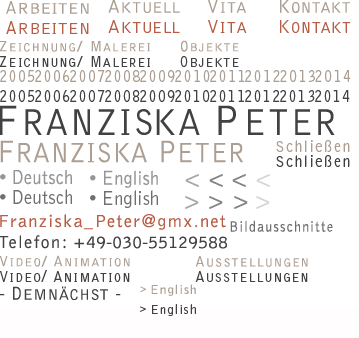
<style>
.page{position:relative;width:359px;height:338px;background:#ffffff}
.page>*{position:absolute;margin:0}
.t1{font:22px "BellGothicStd-Light";color:#ac9e92;font-variant:small-caps;scale:1.07 1}
.t2{font:18.5px "BellGothicStd-Light";letter-spacing:0.06em;color:#ac9e92;font-variant:small-caps;scale:0.87 1}
.t3{font:22.7px "BellGothicStd-Light";letter-spacing:0.06em;color:#ac9e92;font-variant:small-caps;scale:1.04 1}
.t4{font:22px "BellGothicStd-Light";color:#ac9e92;font-variant:small-caps}
.t5{font:19.1px "BellGothicStd-Light";letter-spacing:0.06em;color:#ac9e92;font-variant:small-caps;scale:0.92 1}
.t6{font:22px "BellGothicStd-Light";letter-spacing:0.06em;color:#ac9e92;font-variant:small-caps}
.t7{font:22px "BellGothicStd-Light";letter-spacing:0.025em;color:#ac9e92;font-variant:small-caps}
.t8{font:19.1px "BellGothicStd-Light";letter-spacing:0.07em;color:#ac9e92;font-variant:small-caps;scale:0.92 1}
.t9{font:22px "BellGothicStd-Light";letter-spacing:0.03em;color:#ac9e92;font-variant:small-caps}
.t10{font:19.1px "BellGothicStd-Light";letter-spacing:0.08em;color:#ac9e92;font-variant:small-caps;scale:0.92 1}
.t11{font:22px "BellGothicStd-Light";color:#b75d46;font-variant:small-caps;scale:1.07 1}
.t12{font:18.9px "BellGothicStd-Light";letter-spacing:0.06em;color:#b75d46;font-variant:small-caps;scale:0.85 1}
.t13{font:23.3px "BellGothicStd-Light";letter-spacing:0.06em;color:#b75d46;font-variant:small-caps}
.t14{font:22.9px "BellGothicStd-Light";color:#b75d46;font-variant:small-caps}
.t15{font:22px "BellGothicStd-Light";color:#b75d46;font-variant:small-caps}
.t16{font:19.1px "BellGothicStd-Light";letter-spacing:0.06em;color:#b75d46;font-variant:small-caps;scale:0.92 1}
.t17{font:22px "BellGothicStd-Light";letter-spacing:0.06em;color:#b75d46;font-variant:small-caps}
.t18{font:22px "BellGothicStd-Light";letter-spacing:0.025em;color:#b75d46;font-variant:small-caps}
.t19{font:19.1px "BellGothicStd-Light";letter-spacing:0.07em;color:#b75d46;font-variant:small-caps;scale:0.92 1}
.t20{font:22px "BellGothicStd-Light";letter-spacing:0.02em;color:#b75d46;font-variant:small-caps}
.t21{font:22.9px "BellGothicStd-Light";letter-spacing:0.025em;color:#b75d46;font-variant:small-caps;scale:0.96 1}
.t22{font:19.1px "BellGothicStd-Light";letter-spacing:0.08em;color:#b75d46;font-variant:small-caps;scale:0.92 1}
.t23{font:22px "BellGothicStd-Light";letter-spacing:0.03em;color:#b75d46;font-variant:small-caps}
.t24{font:22px "BellGothicStd-Light";letter-spacing:-0.03em;color:#b75d46;font-variant:small-caps}
.t25{font:22.9px "BellGothicStd-Light";color:#b75d46;font-variant:small-caps;scale:0.96 1}
.t26{font:22px "BellGothicStd-Light";letter-spacing:0.03em;color:#b75d46;font-variant:small-caps;scale:0.97 1}
.t27{font:17px "BellGothicStd-Light";letter-spacing:0.08em;color:#ac9e92;font-variant:small-caps}
.t28{font:15.3px "BellGothicStd-Light";letter-spacing:0.1em;color:#ac9e92;font-variant:small-caps;scale:0.89 1}
.t29{font:15.3px "BellGothicStd-Light";letter-spacing:0.1em;color:#ac9e92;font-variant:small-caps;scale:1.11 1}
.t30{font:15.3px "BellGothicStd-Light";letter-spacing:0.06em;color:#ac9e92;font-variant:small-caps;scale:0.89 1}
.t31{font:17px "BellGothicStd-Light";letter-spacing:0.08em;color:#414142;font-variant:small-caps}
.t32{font:15.3px "BellGothicStd-Light";letter-spacing:0.1em;color:#414142;font-variant:small-caps;scale:0.89 1}
.t33{font:15.3px "BellGothicStd-Light";letter-spacing:0.1em;color:#414142;font-variant:small-caps;scale:1.11 1}
.t34{font:15.3px "BellGothicStd-Light";letter-spacing:0.06em;color:#414142;font-variant:small-caps;scale:0.89 1}
.t35{font:18px "BellGothicStd-Light";letter-spacing:0.1em;color:#ac9e92;font-variant:small-caps;scale:0.8 1}
.t36{font:18px "BellGothicStd-Light";letter-spacing:0.1em;color:#ac9e92;font-variant:small-caps;scale:0.77 1}
.t37{font:18px "BellGothicStd-Light";letter-spacing:0.1em;color:#414142;font-variant:small-caps;scale:0.8 1}
.t38{font:55px "BellGothicStd-Light";letter-spacing:0.04em;color:#414142;font-variant:small-caps;scale:0.9 1}
.t39{font:44px "BellGothicStd-Light";letter-spacing:0.04em;color:#414142;font-variant:small-caps;scale:0.9 1}
.t40{font:52.2px "BellGothicStd-Light";letter-spacing:-0.06em;color:#414142;font-variant:small-caps;scale:0.95 1}
.t41{font:55px "BellGothicStd-Light";letter-spacing:0.06em;color:#414142;font-variant:small-caps;scale:0.9 1}
.t42{font:44px "BellGothicStd-Light";letter-spacing:0.1em;color:#414142;font-variant:small-caps;scale:0.9 1}
.t43{font:41px "BellGothicStd-Light";letter-spacing:0.02em;color:#ac9e92;font-variant:small-caps;scale:0.9 1}
.t44{font:32px "BellGothicStd-Light";color:#ac9e92;font-variant:small-caps;scale:0.9 1}
.t45{font:39.8px "BellGothicStd-Light";letter-spacing:0.02em;color:#ac9e92;font-variant:small-caps;scale:0.93 1}
.t46{font:16px "BellGothicStd-Light";letter-spacing:0.08em;color:#ac9e92}
.t47{font:16.6px "BellGothicStd-Light";letter-spacing:0.08em;color:#ac9e92;scale:0.96 1}
.t48{font:16px "BellGothicStd-Light";letter-spacing:0.08em;color:#414142}
.t49{font:16.6px "BellGothicStd-Light";letter-spacing:0.08em;color:#414142;scale:0.96 1}
.t50{font:20px "BellGothicStd-Light";letter-spacing:0.02em;color:#939598;scale:0.9 1}
.t51{font:21px "BellGothicStd-Light";letter-spacing:0.02em;color:#939598;scale:0.9 1}
.t52{font:20px "BellGothicStd-Light";letter-spacing:0.02em;color:#6d6f71;scale:0.9 1}
.t53{font:21px "BellGothicStd-Light";letter-spacing:0.02em;color:#6d6f71;scale:0.9 1}
.t54{font:18px "BellGothicStd-Light";letter-spacing:0.08em;color:#b75d46}
.t55{font:15.3px "BellGothicStd-Light";letter-spacing:0.1em;color:#6d6f71;scale:0.89 1}
.t56{font:18px "BellGothicStd-Light";color:#414142}
.t57{font:18px "BellGothicStd-Light";letter-spacing:0.08em;color:#414142}
.t58{font:17px "BellGothicStd-Light";letter-spacing:0.1em;color:#ac9e92;font-variant:small-caps}
.t59{font:17px "BellGothicStd-Light";letter-spacing:0.04em;color:#ac9e92;font-variant:small-caps}
.t60{font:17px "BellGothicStd-Light";letter-spacing:0.1em;color:#414142;font-variant:small-caps}
.t61{font:17px "BellGothicStd-Light";letter-spacing:0.04em;color:#414142;font-variant:small-caps}
.t62{font:22px "BellGothicStd-Light";letter-spacing:0.02em;color:#414142;font-variant:small-caps}
.t63{font:19.1px "BellGothicStd-Light";letter-spacing:0.06em;color:#414142;font-variant:small-caps;scale:0.84 1}
.t64{font:13px "BellGothicStd-Light";letter-spacing:0.08em;color:#ac9e92}
.t65{font:10px "BellGothicStd-Light";letter-spacing:0.08em;color:#ac9e92}
.t66{font:13px "BellGothicStd-Light";letter-spacing:0.08em;color:#ac9e92;scale:1.04 1}
.t67{font:13px "BellGothicStd-Light";letter-spacing:0.06em;color:#ac9e92}
.t68{font:13px "BellGothicStd-Light";letter-spacing:0.12em;color:#ac9e92}
.t69{font:13px "BellGothicStd-Light";letter-spacing:0.08em;color:#414142}
.t70{font:10px "BellGothicStd-Light";letter-spacing:0.08em;color:#414142;scale:1.08 1}
.t71{font:11.7px "BellGothicStd-Light";letter-spacing:0.08em;color:#414142;scale:1.11 1}
.t72{font:13px "BellGothicStd-Light";letter-spacing:0.08em;color:#414142;scale:0.94 1}
.t73{font:13px "BellGothicStd-Light";letter-spacing:0.1em;color:#414142}
</style>
<div class="page">
<p class="t1" style="left:6px;top:1px;width:83px;height:13px"><span class="t2">A</span><span class="t3">r</span>beiten</p>
<p class="t4" style="left:108px;top:0px;width:72px;height:13px"><span class="t5">A</span><span class="t6">k</span><span class="t7">t</span>uell</p>
<p class="t6" style="left:208px;top:0px;width:38px;height:13px"><span class="t8">V</span>it<span class="t7">a</span></p>
<p class="t9" style="left:280px;top:0px;width:70px;height:13px"><span class="t10">K</span><span class="t4">o</span>nt<span class="t4">a</span>kt</p>
<p class="t11" style="left:6px;top:21px;width:83px;height:13px"><span class="t12">A</span><span class="t13">r</span>b<span class="t14">e</span>it<span class="t14">e</span>n</p>
<p class="t15" style="left:108px;top:20px;width:72px;height:13px"><span class="t16">A</span><span class="t17">k</span><span class="t18">t</span>uell</p>
<p class="t19" style="left:208px;top:20px;width:39px;height:13px">V<span class="t17">i</span><span class="t20">t</span><span class="t21">a</span></p>
<p class="t22" style="left:280px;top:20px;width:71px;height:13px">K<span class="t15">o</span><span class="t23">n</span><span class="t24">t</span><span class="t25">a</span><span class="t23">k</span><span class="t26">t</span></p>
<p class="t27" style="left:0px;top:40px;width:150px;height:12px"><span class="t28">Z</span>eichnung<span class="t29">/ </span><span class="t30">M</span>alerei</p>
<p class="t27" style="left:181px;top:40px;width:58px;height:12px"><span class="t28">O</span>bjekte</p>
<p class="t31" style="left:0px;top:56px;width:150px;height:11px"><span class="t32">Z</span>eichnung<span class="t33">/ </span><span class="t34">M</span>alerei</p>
<p class="t31" style="left:180px;top:56px;width:59px;height:11px"><span class="t32">O</span>bjekte</p>
<p class="t35" style="left:0px;top:70px;width:35px;height:12px">2005</p>
<p class="t35" style="left:35px;top:70px;width:35px;height:12px">200<span class="t36">6</span></p>
<p class="t35" style="left:70px;top:70px;width:35px;height:12px">2007</p>
<p class="t35" style="left:105px;top:70px;width:35px;height:12px">2008</p>
<p class="t35" style="left:140px;top:70px;width:35px;height:12px">2009</p>
<p class="t35" style="left:175px;top:70px;width:35px;height:12px">2010</p>
<p class="t35" style="left:210px;top:70px;width:35px;height:12px">2011</p>
<p class="t35" style="left:245px;top:70px;width:35px;height:12px">2012</p>
<p class="t35" style="left:280px;top:70px;width:35px;height:12px">2013</p>
<p class="t35" style="left:315px;top:70px;width:36px;height:12px">2014</p>
<p class="t37" style="left:0px;top:90px;width:35px;height:12px">2005</p>
<p class="t37" style="left:35px;top:90px;width:35px;height:12px">2006</p>
<p class="t37" style="left:70px;top:90px;width:35px;height:12px">2007</p>
<p class="t37" style="left:105px;top:90px;width:35px;height:12px">2008</p>
<p class="t37" style="left:140px;top:90px;width:35px;height:12px">2009</p>
<p class="t37" style="left:175px;top:90px;width:35px;height:12px">2010</p>
<p class="t37" style="left:210px;top:90px;width:34px;height:12px">2011</p>
<p class="t37" style="left:245px;top:90px;width:35px;height:12px">2012</p>
<p class="t37" style="left:280px;top:90px;width:35px;height:12px">2013</p>
<p class="t37" style="left:315px;top:90px;width:35px;height:12px">2014</p>
<p class="t38" style="left:0px;top:105px;width:335px;height:30px"><span class="t39">F</span>ranzi<span class="t40">s</span><span class="t41">k</span>a <span class="t42">P</span>eter</p>
<p class="t43" style="left:0px;top:140px;width:243px;height:23px"><span class="t44">F</span>ranzi<span class="t45">s</span>ka <span class="t44">P</span>eter</p>
<p class="t46" style="left:276px;top:140px;width:74px;height:12px">Schl<span class="t47">i</span>eßen</p>
<p class="t48" style="left:276px;top:155px;width:74px;height:12px">Schl<span class="t49">i</span>eßen</p>
<p class="t50" style="left:13px;top:169px;width:59px;height:16px"><span class="t51">D</span>eutsch</p>
<p class="t50" style="left:104px;top:170px;width:54px;height:18px"><span class="t51">E</span>nglish</p>
<p class="t52" style="left:13px;top:189px;width:59px;height:15px"><span class="t53">D</span>eutsch</p>
<p class="t52" style="left:104px;top:190px;width:54px;height:18px"><span class="t53">E</span>nglish</p>
<p class="t54" style="left:0px;top:214px;width:226px;height:16px">Franziska_Peter@gmx.net</p>
<p class="t55" style="left:230px;top:220px;width:103px;height:12px">Bildausschnitte</p>
<p class="t56" style="left:0px;top:235px;width:227px;height:14px"><span class="t57">Telefon: +</span>49-030-55129588</p>
<p class="t58" style="left:0px;top:255px;width:130px;height:12px"><span class="t28">V</span>ideo<span class="t29">/</span><span class="t28"> A</span>nimation</p>
<p class="t58" style="left:195px;top:256px;width:113px;height:11px"><span class="t28">A</span>usstel<span class="t59">l</span>ung<span class="t59">e</span>n</p>
<p class="t60" style="left:0px;top:270px;width:130px;height:12px"><span class="t32">V</span>ideo/ <span class="t32">A</span>nimation</p>
<p class="t60" style="left:195px;top:271px;width:113px;height:11px"><span class="t32">A</span>usstel<span class="t61">l</span>ung<span class="t61">e</span>n</p>
<p class="t62" style="left:0px;top:286px;width:121px;height:15px"><span class="t63">  - D</span>emnächst <span class="t63">-</span></p>
<p class="t64" style="left:140px;top:284px;width:56px;height:12px"><span class="t65">&gt; </span>E<span class="t66">n</span><span class="t67">g</span><span class="t68">l</span>ish</p>
<p class="t69" style="left:140px;top:304px;width:56px;height:12px"><span class="t70">&gt; </span><span class="t71">E</span><span class="t72">n</span>g<span class="t73">l</span><span class="t71">i</span>sh</p>
</div>
